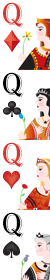
<style>
.page{position:relative;width:50px;height:280px;background:#ffffff}
.page>*{position:absolute;margin:0}
.t1{font:32px "Algerian";letter-spacing:0.04em;color:#d6362e;text-transform:uppercase}
.t2{font:32px "Algerian";letter-spacing:0.04em;color:#000000;text-transform:uppercase}
</style>
<div class="page">
<p class="t1" style="left:3px;top:2px;width:21px;height:26px">Q</p>
<p class="t2" style="left:3px;top:72px;width:21px;height:26px">Q</p>
<p class="t1" style="left:3px;top:142px;width:21px;height:26px">Q</p>
<p class="t2" style="left:3px;top:212px;width:21px;height:26px">Q</p>
</div>
